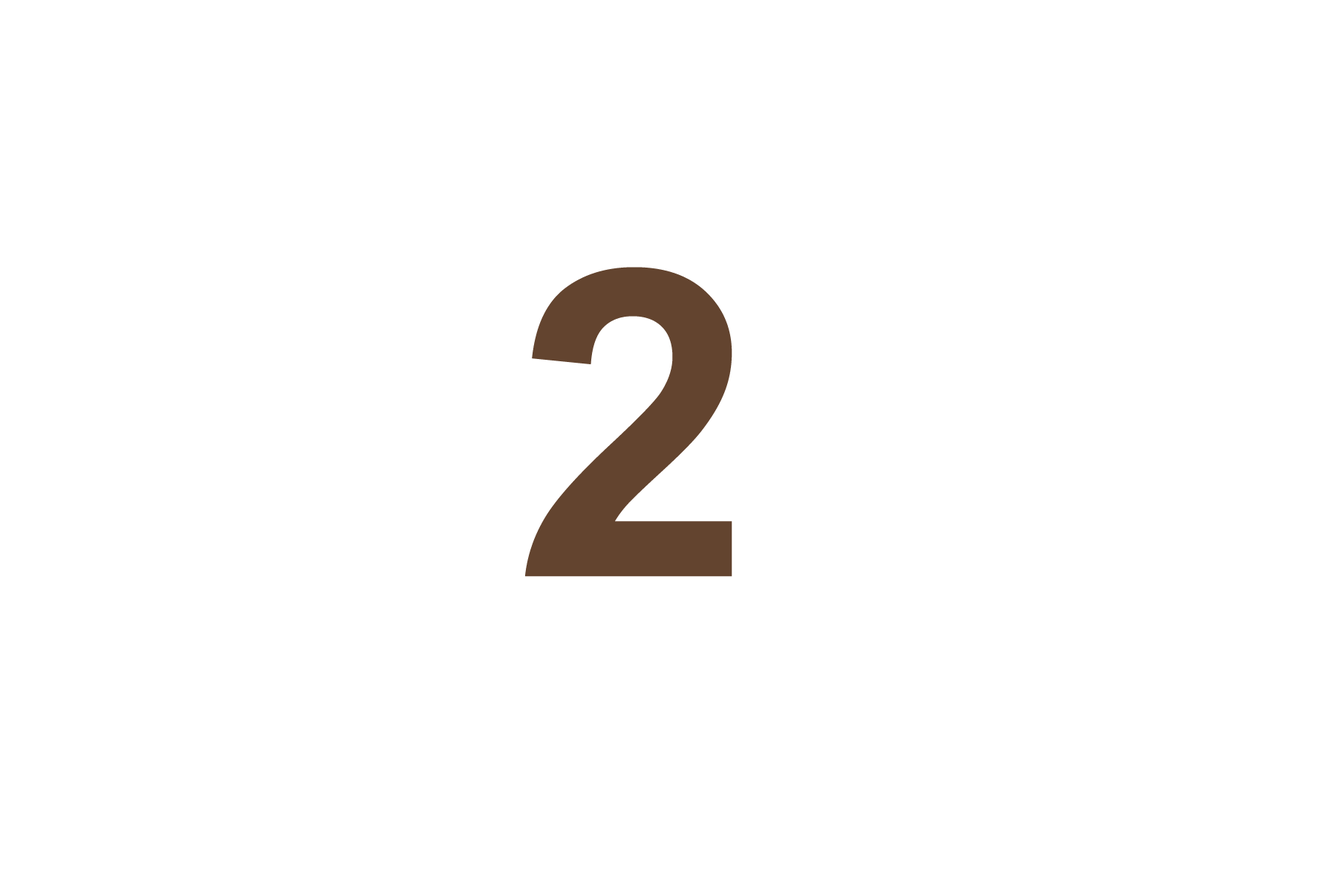
<style>
.page{position:relative;width:1337px;height:892px;background:#ffffff}
.page>*{position:absolute;margin:0}
.t1{font:429.6px "Arial-BoldMT";color:#63442f}
</style>
<div class="page">
<p class="t1" style="left:525px;top:267px;width:208px;height:310px">2</p>
</div>
